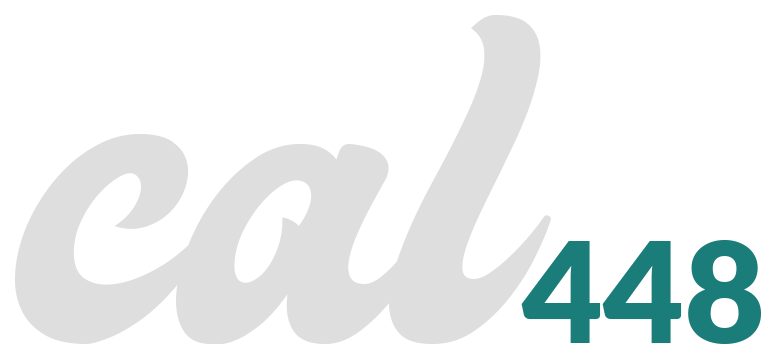
<style>
.page{position:relative;width:776px;height:359px;background:#ffffff}
.page>*{position:absolute;margin:0}
.t1{font:400px "MattoaDemo";color:#dedede}
.t2{font:140px "Lato-Black";color:#1b7d7a}
</style>
<div class="page">
<p class="t1" style="left:15px;top:15px;width:536px;height:329px">cal</p>
<p class="t2" style="left:521px;top:240px;width:240px;height:104px">448</p>
</div>
